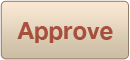
<style>
.page{position:relative;width:130px;height:60px}
.page>*{position:absolute;margin:0}
.t1{font:24px "HelveticaNeue-Bold";color:#a7503d}
</style>
<div class="page">
<p class="t1" style="left:17px;top:22px;width:96px;height:21px">Approve</p>
</div>
